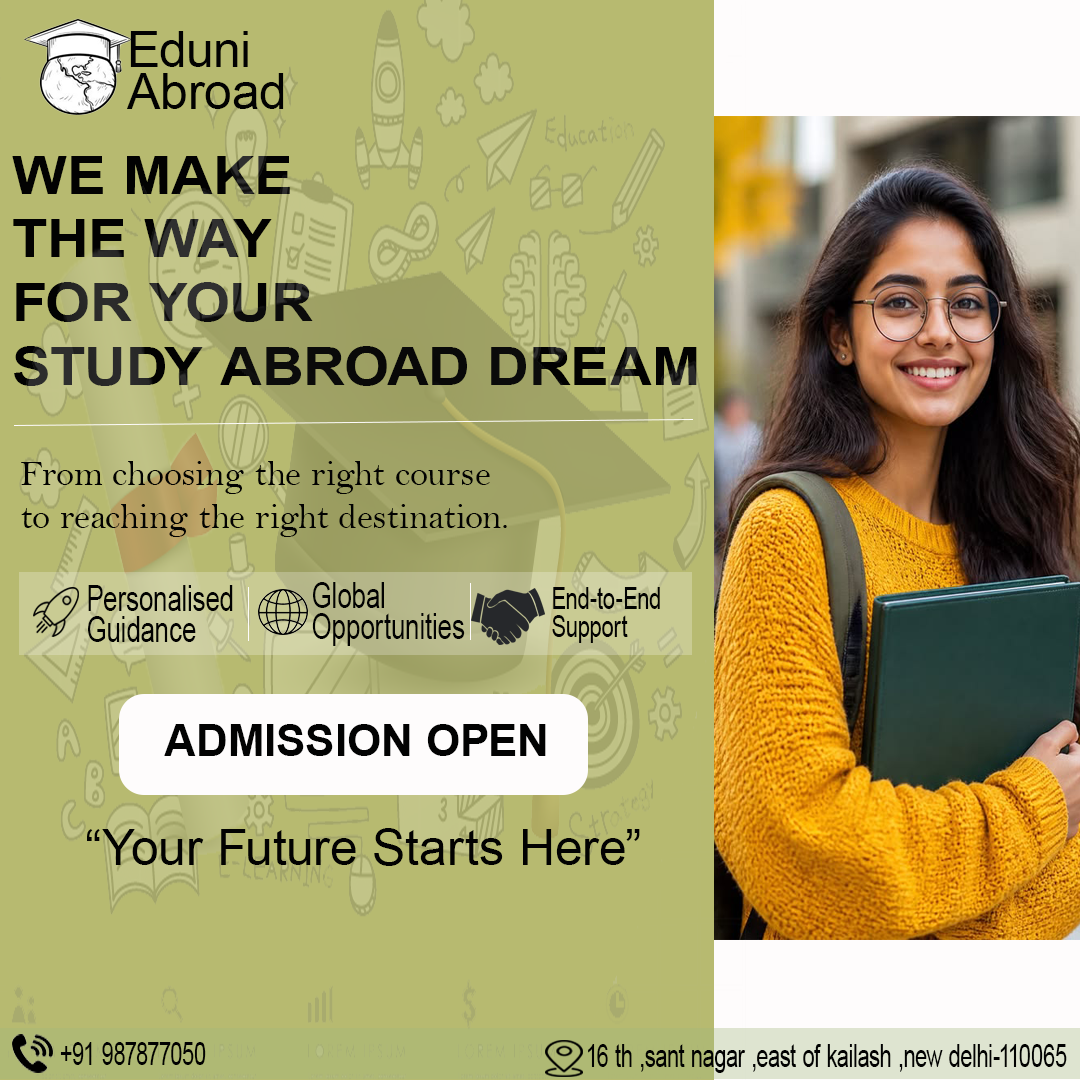
<style>
.page{position:relative;width:1080px;height:1080px;background:#b7ba70}
.page>*{position:absolute;margin:0}
.t1{font:50px/42.3px "ArialMT";letter-spacing:0.01em;color:#020202}
.t2{font:53px "Arial-BoldMT";letter-spacing:0.01em;color:#020202;scale:1.1 1}
.t3{font:36.2px "BellMT";letter-spacing:0.01em;color:#020202}
.t4{font:36.4px/31.7px "ArialMT";letter-spacing:0.01em;color:#020202;scale:0.71 1}
.t5{font:31.4px/27.5px "ArialMT";letter-spacing:0.01em;color:#020202;scale:0.69 1}
.t6{font:44.9px "Arial-BoldMT";letter-spacing:0.01em;color:#020202}
.t7{font:50px "ArialMT";letter-spacing:0.01em;color:#020202}
.t8{font:32.2px "ArialMT";letter-spacing:0.01em;color:#020202;scale:0.67 1}
</style>
<div class="page">
<p class="t1" style="left:127px;top:31px;width:157px;height:78px">Eduni<br>Abroad</p>
<p class="t2" style="left:12px;top:156px;width:685px;height:230px">WE MAKE <br>THE WAY <br>FOR YOUR <br>STUDY ABROAD DREAM</p>
<p class="t3" style="left:21px;top:461px;width:486px;height:76px">From choosing the right course<br>to reaching the right destination.</p>
<p class="t4" style="left:312px;top:582px;width:153px;height:64px">Global<br>Opportunities</p>
<p class="t4" style="left:88px;top:585px;width:145px;height:57px">Personalised<br>Guidance</p>
<p class="t5" style="left:552px;top:587px;width:108px;height:56px">End-to-End<br>Support</p>
<p class="t6" style="left:164px;top:724px;width:382px;height:32px">ADMISSION OPEN</p>
<p class="t7" style="left:87px;top:828px;width:553px;height:38px">“Your Future Starts Here”</p>
<p class="t8" style="left:60px;top:1042px;width:146px;height:23px">+91 987877050</p>
<p class="t8" style="left:588px;top:1044px;width:479px;height:29px">16 th ,sant nagar ,east of kailash ,new delhi-110065</p>
</div>
